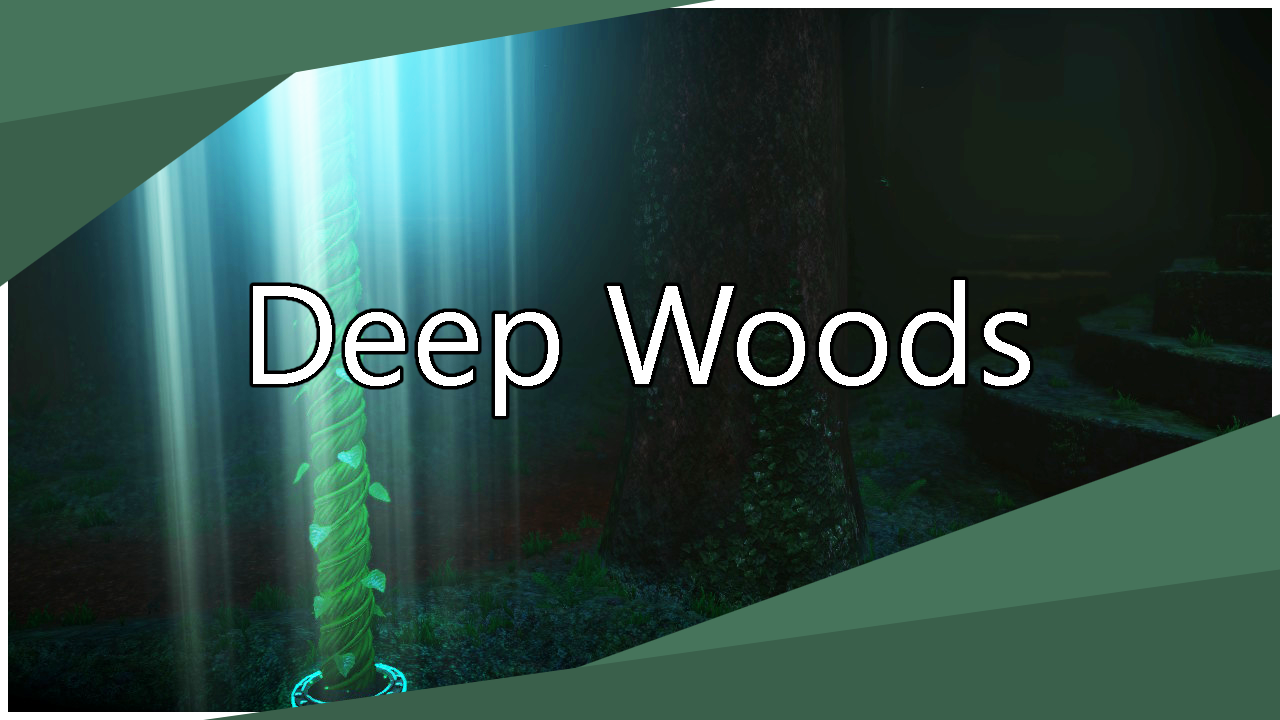
<style>
.page{position:relative;width:1280px;height:720px}
.page>*{position:absolute;margin:0}
.t1{font:140px "SegoeUI";color:#ffffff}
</style>
<div class="page">
<p class="t1" style="left:253px;top:280px;width:777px;height:136px">Deep Woods</p>
</div>
